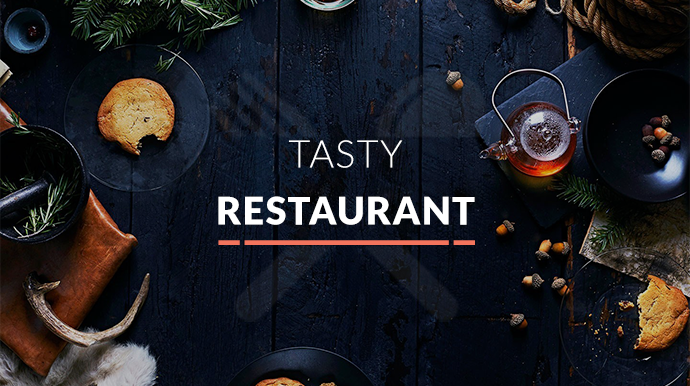
<style>
.page{position:relative;width:690px;height:386px}
.page>*{position:absolute;margin:0}
.t1{font:37.9px/56.8px "Lato-Black";letter-spacing:0.035em;color:#ffffff}
.t2{font:37.9px/56.8px "Lato-Light";letter-spacing:0.035em;color:#ffffff}
</style>
<div class="page">
<p class="t1" style="left:218px;top:140px;width:257px;height:85px;text-align:center"><span class="t2">TASTY<br></span>RESTAURANT</p>
</div>
